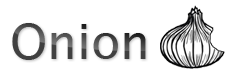
<style>
.page{position:relative;width:236px;height:79px;background:#ffffff}
.page>*{position:absolute;margin:0}
.t1{font:48px "LucidaSansUnicode";color:#404040}
</style>
<div class="page">
<p class="t1" style="left:12px;top:23px;width:134px;height:37px">Onion</p>
</div>
